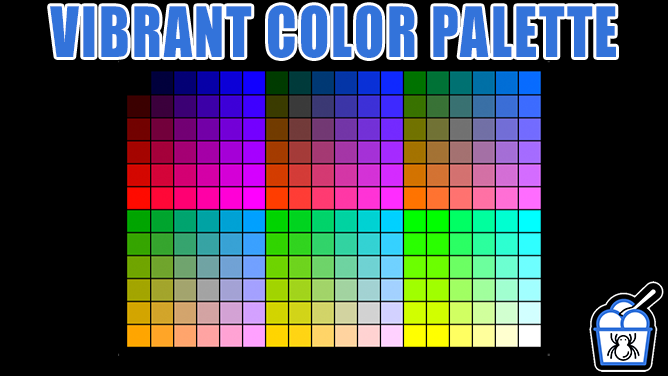
<style>
.page{position:relative;width:668px;height:376px;background:#000000}
.page>*{position:absolute;margin:0}
.t1{font:64.1px "Impact";letter-spacing:0.04em;color:#3373da;scale:0.86 1}
</style>
<div class="page">
<p class="t1" style="left:50px;top:5px;width:566px;height:53px">VIBRANT COLOR PALETTE</p>
</div>
